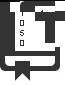
<style>
.page{position:relative;width:65px;height:85px;background:#ffffff}
.page>*{position:absolute;margin:0}
.t1{font:8px "ArialMT";color:#333333}
.t2{font:8px "ArialMT";color:#ffffff}
</style>
<div class="page">
<p class="t1" style="left:21px;top:9px;width:2px;height:6px">1</p>
<p class="t1" style="left:20px;top:19px;width:4px;height:6px">0</p>
<p class="t2" style="left:20px;top:29px;width:4px;height:6px">5</p>
<p class="t1" style="left:20px;top:39px;width:4px;height:6px">0</p>
</div>
